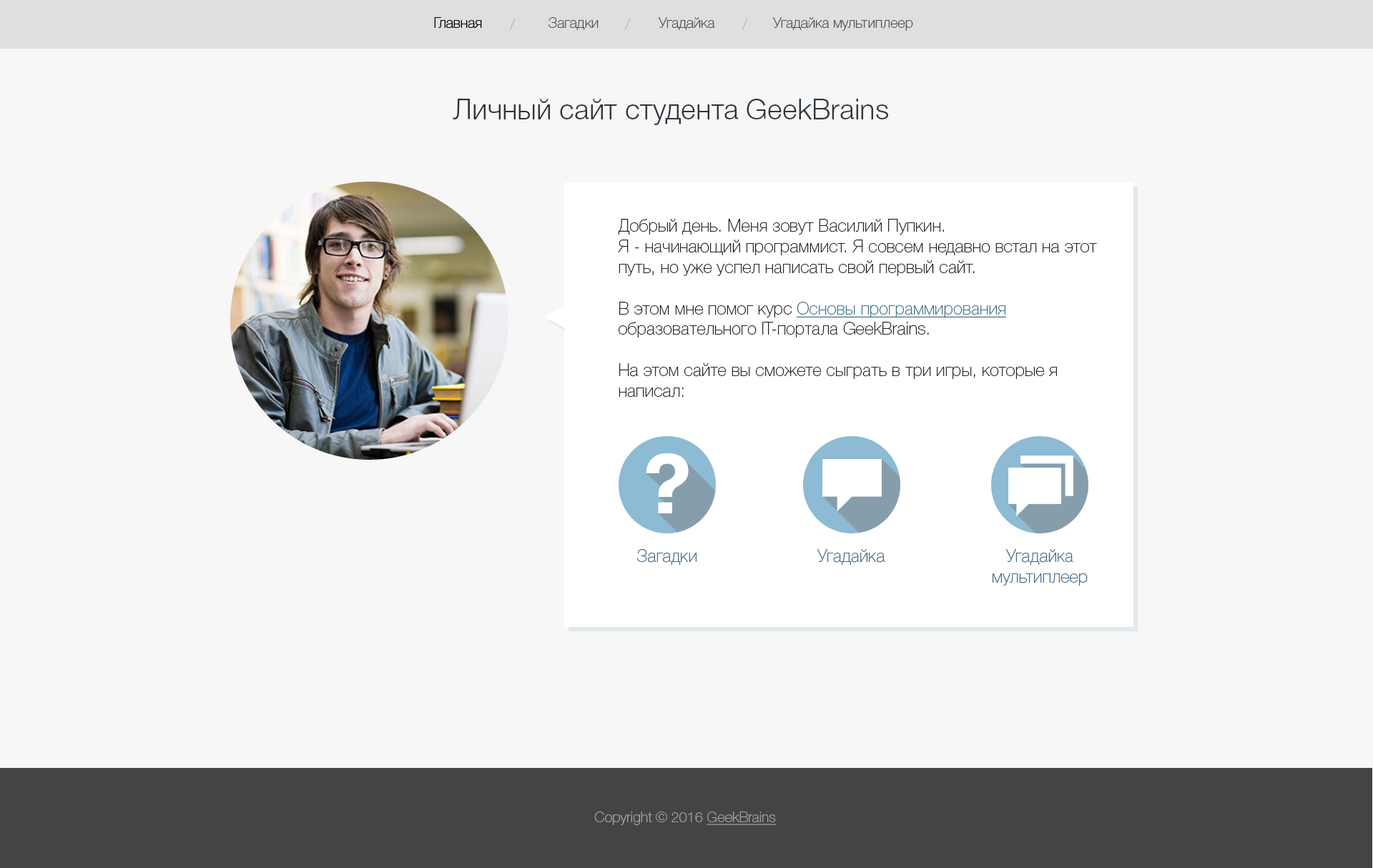
<style>
.page{position:relative;width:1373px;height:868px;background:#f7f7f7}
.page>*{position:absolute;margin:0}
.t1{font:14.3px "HelveticaNeueCyr-Thin";color:#000000}
.t2{font:14.3px "HelveticaNeueCyr-Thin";color:#4d4d4d}
.t3{font:14.3px "SegoeUI-Light";color:#8cbbd3}
.t4{font:28.6px "HelveticaNeueCyr-Light";color:#2e353d}
.t5{font:17.2px "HelveticaNeueCyr-Thin";color:#242424}
.t6{font:17.2px "HelveticaNeueCyr-Thin";color:#43728a;text-decoration:underline}
.t7{font:17.2px "HelveticaNeueCyr-Thin";color:#40678a}
.t8{font:14.3px "HelveticaNeueCyr-Thin";color:#a4a4a4}
.t9{font:14.3px "HelveticaNeueCyr-Thin";color:#a4a4a4;text-decoration:underline}
</style>
<div class="page">
<p class="t1" style="left:434px;top:17px;width:48px;height:11px">Главная</p>
<p class="t1" style="left:434px;top:17px;width:48px;height:11px">Главная</p>
<p class="t2" style="left:549px;top:17px;width:50px;height:13px">Загадки</p>
<p class="t2" style="left:658px;top:17px;width:57px;height:13px">Угадайка</p>
<p class="t2" style="left:772px;top:17px;width:141px;height:14px">Угадайка мультиплеер</p>
<p class="t3" style="left:509px;top:19px;width:7px;height:11px">/</p>
<p class="t3" style="left:624px;top:19px;width:7px;height:11px">/</p>
<p class="t3" style="left:742px;top:19px;width:6px;height:11px">/</p>
<p class="t4" style="left:453px;top:99px;width:435px;height:26px">Личный сайт студента GeekBrains</p>
<p class="t5" style="left:618px;top:219px;width:479px;height:179px">Добрый день. Меня зовут Василий Пупкин. <br>Я - начинающий программист. Я совсем недавно встал на этот путь, но уже успел написать свой первый сайт.<br><br>В этом мне помог курс <span class="t6">Основы программирования </span>образовательного IT-портала GeekBrains.<br><br>На этом сайте вы сможете сыграть в три игры, которые я написал:</p>
<p class="t7" style="left:637px;top:549px;width:60px;height:16px">Загадки</p>
<p class="t7" style="left:817px;top:549px;width:68px;height:16px">Угадайка</p>
<p class="t7" style="left:993px;top:549px;width:95px;height:37px;text-align:center">Угадайка<br>мультиплеер</p>
<p class="t8" style="left:594px;top:812px;width:182px;height:13px">Copyright © 2016 <span class="t9">GeekBrains</span></p>
</div>
